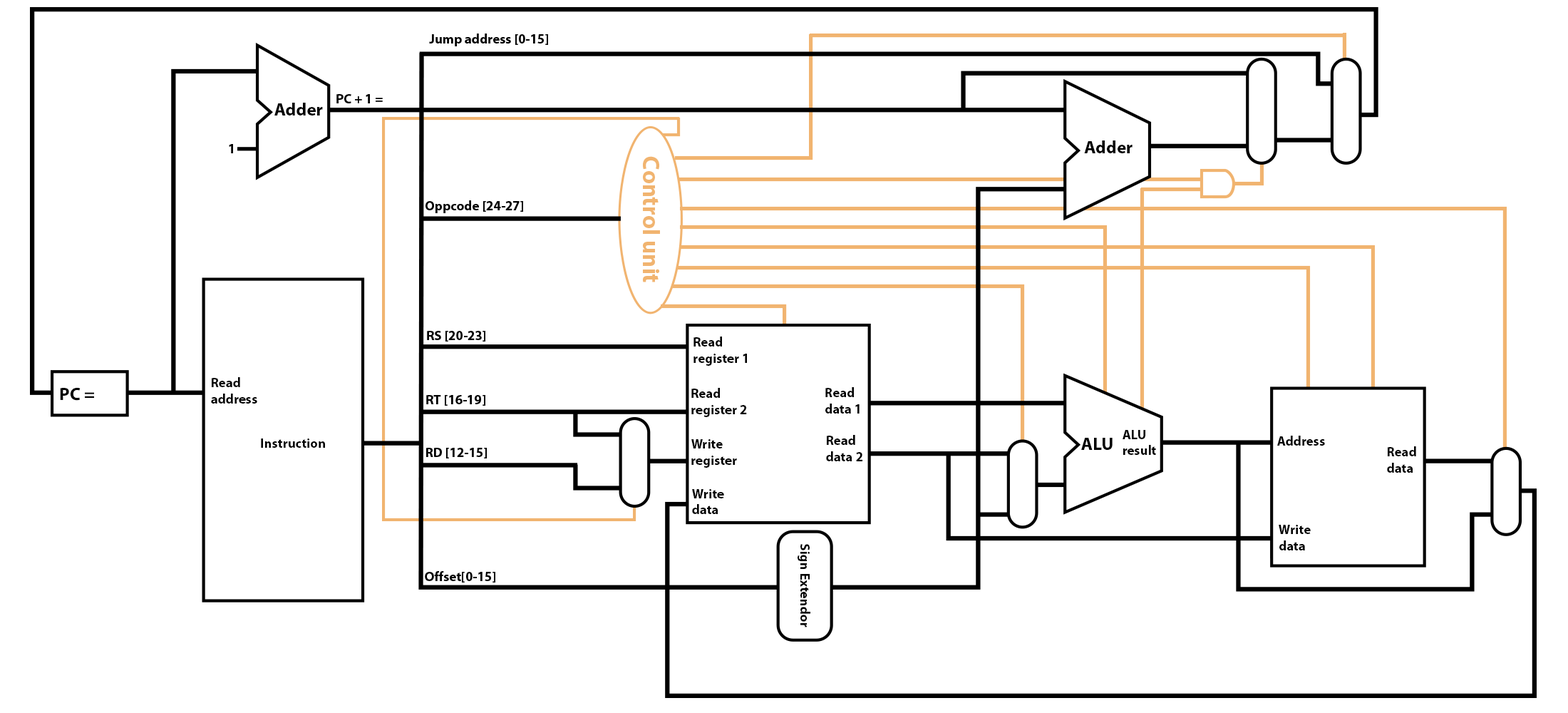
<style>
.page{position:relative;width:1568px;height:713px;background:#ffffff}
.page>*{position:absolute;margin:0}
.t1{font:13.4px "MyriadPro-Bold";color:#000000}
.t2{font:17.8px "MyriadPro-Bold";color:#000000}
.t3{font:23.8px "MyriadPro-Bold";color:#f1b470}
</style>
<div class="page">
<p class="t1" style="left:429px;top:33px;width:119px;height:13px">Jump address [0-15]</p>
<p class="t1" style="left:336px;top:94px;width:47px;height:9px">PC + 1 =</p>
<p class="t2" style="left:274px;top:103px;width:49px;height:12px">Adder</p>
<p class="t1" style="left:229px;top:144px;width:4px;height:9px">1</p>
<p class="t2" style="left:1084px;top:140px;width:49px;height:13px">Adder</p>
<p class="t3" style="left:643px;top:156px;width:17px;height:126px;rotate:90deg">Control unit</p>
<p class="t1" style="left:425px;top:200px;width:98px;height:13px">Oppcode [24-27]</p>
<p class="t1" style="left:427px;top:331px;width:58px;height:10px">RS [20-23]</p>
<p class="t1" style="left:693px;top:336px;width:54px;height:30px">Read<br>register 1</p>
<p class="t1" style="left:211px;top:377px;width:46px;height:26px">Read<br>address</p>
<p class="t2" style="left:60px;top:387px;width:34px;height:14px">PC =</p>
<p class="t1" style="left:691px;top:388px;width:56px;height:29px">Read<br>register 2</p>
<p class="t1" style="left:825px;top:387px;width:35px;height:26px">Read<br>data 1</p>
<p class="t1" style="left:426px;top:395px;width:59px;height:11px">RT [16-19]</p>
<p class="t1" style="left:826px;top:435px;width:36px;height:26px">Read<br>data 2</p>
<p class="t2" style="left:1081px;top:438px;width:32px;height:12px">ALU</p>
<p class="t1" style="left:1123px;top:430px;width:33px;height:25px">ALU<br>result</p>
<p class="t1" style="left:1277px;top:435px;width:48px;height:10px">Address</p>
<p class="t1" style="left:261px;top:438px;width:64px;height:10px">Instruction</p>
<p class="t1" style="left:426px;top:448px;width:61px;height:10px">RD [12-15]</p>
<p class="t1" style="left:691px;top:439px;width:46px;height:29px">Write<br>register</p>
<p class="t1" style="left:1387px;top:446px;width:29px;height:27px">Read<br>data</p>
<p class="t1" style="left:692px;top:489px;width:32px;height:25px">Write<br>data</p>
<p class="t1" style="left:1279px;top:525px;width:32px;height:25px">Write<br>data</p>
<p class="t1" style="left:798px;top:544px;width:12px;height:83px;rotate:90deg">Sign Extendor</p>
<p class="t1" style="left:425px;top:571px;width:70px;height:11px">Offset[0-15]</p>
</div>
